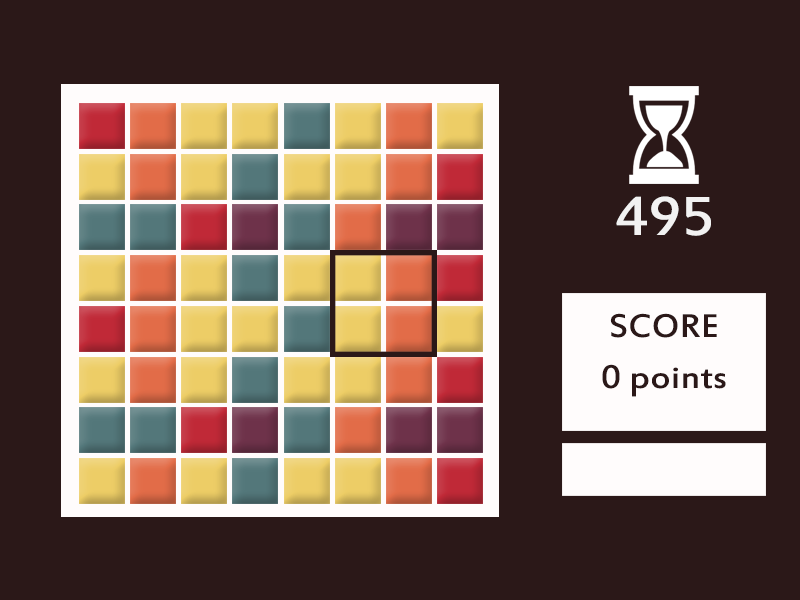
<style>
.page{position:relative;width:800px;height:600px;background:#2b1818}
.page>*{position:absolute;margin:0}
.t1{font:60px "EstrangeloEdessa";color:#f2f2f2;text-transform:uppercase;scale:1.1 1}
.t2{font:36px "EstrangeloEdessa";color:#2b1818;text-transform:uppercase;scale:1.1 1}
.t3{font:36px "EstrangeloEdessa";color:#2b1818;scale:1.1 1}
</style>
<div class="page">
<p class="t1" style="left:616px;top:196px;width:95px;height:40px">495</p>
<p class="t2" style="left:610px;top:313px;width:107px;height:25px">Score</p>
<p class="t3" style="left:602px;top:364px;width:124px;height:33px">0 points</p>
</div>
